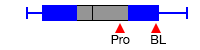
<style>
.page{position:relative;width:200px;height:50px;background:#ffffff}
.page>*{position:absolute;margin:0}
.t1{font:12.5px "HelveticaNeue";color:#000000}
</style>
<div class="page">
<p class="t1" style="left:111px;top:35px;width:19px;height:9px">Pro</p>
<p class="t1" style="left:151px;top:35px;width:15px;height:9px">BL</p>
</div>
